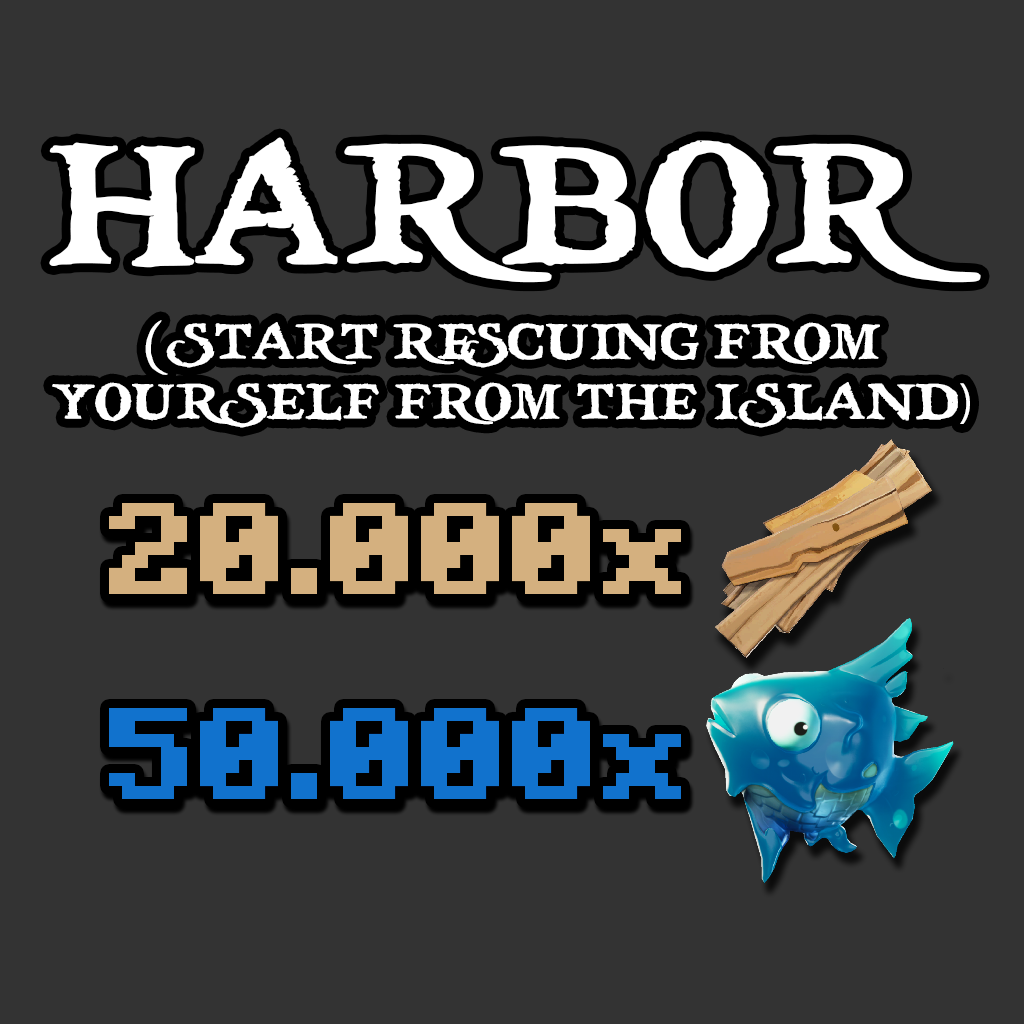
<style>
.page{position:relative;width:1024px;height:1024px;background:#333333}
.page>*{position:absolute;margin:0}
.t1{font:171.3px "treasuremap";color:#ffffff}
.t2{font:50px "treasuremap";color:#ffffff}
.t3{font:50px "MyriadPro-Regular";color:#ffffff}
.t4{font:130px "Minecraft-Bold";color:#d4b07f}
.t5{font:130px "Minecraft-Bold";color:#1172cd}
</style>
<div class="page">
<p class="t1" style="left:49px;top:137px;width:932px;height:146px">HARBOR</p>
<p class="t2" style="left:52px;top:320px;width:918px;height:108px;text-align:center">(START RESCUING FROM <br>YOURSELF FROM THE ISLAND<span class="t3">)</span></p>
<p class="t4" style="left:109px;top:503px;width:572px;height:91px">20.000x</p>
<p class="t5" style="left:109px;top:708px;width:572px;height:91px">50.000x</p>
</div>
